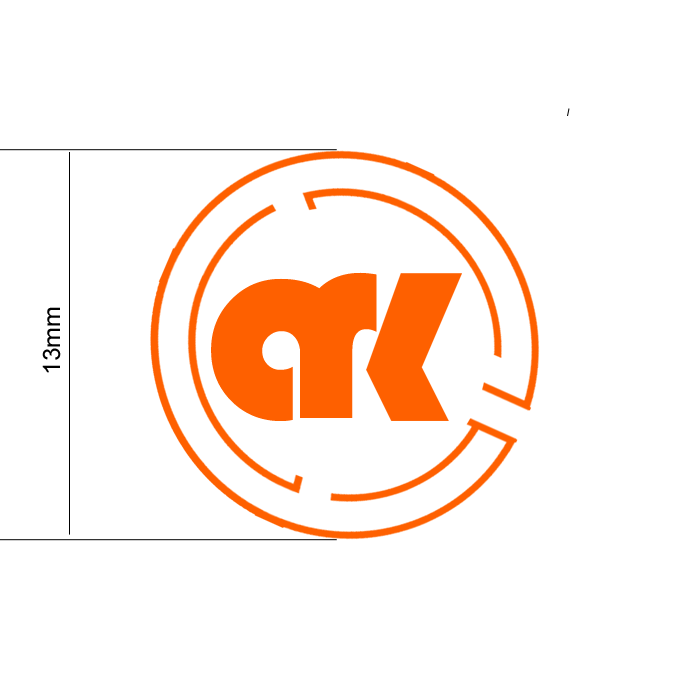
<style>
.page{position:relative;width:690px;height:690px;background:#ffffff}
.page>*{position:absolute;margin:0}
.t1{font:279.8px "Bauhaus93";color:#fe6000}
.t2{font:291.7px "Bauhaus93";color:#fe6000}
.t3{font:24.1px "ArialMT";color:#000000;scale:1.03 1}
</style>
<div class="page">
<p class="t1" style="left:211px;top:278px;width:140px;height:143px">a</p>
<p class="t2" style="left:300px;top:272px;width:77px;height:146px">r</p>
<p class="t3" style="left:42px;top:307px;width:19px;height:66px;rotate:-90deg">13mm</p>
</div>
